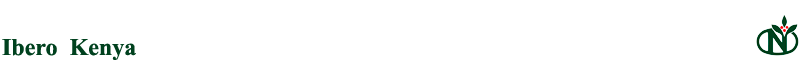
<style>
.page{position:relative;width:800px;height:60px;background:#ffffff}
.page>*{position:absolute;margin:0}
.t1{font:24px "TimesNewRomanPS-BoldMT";color:#00411e}
</style>
<div class="page">
<p class="t1" style="left:2px;top:39px;width:134px;height:22px">Ibero  Kenya</p>
</div>
